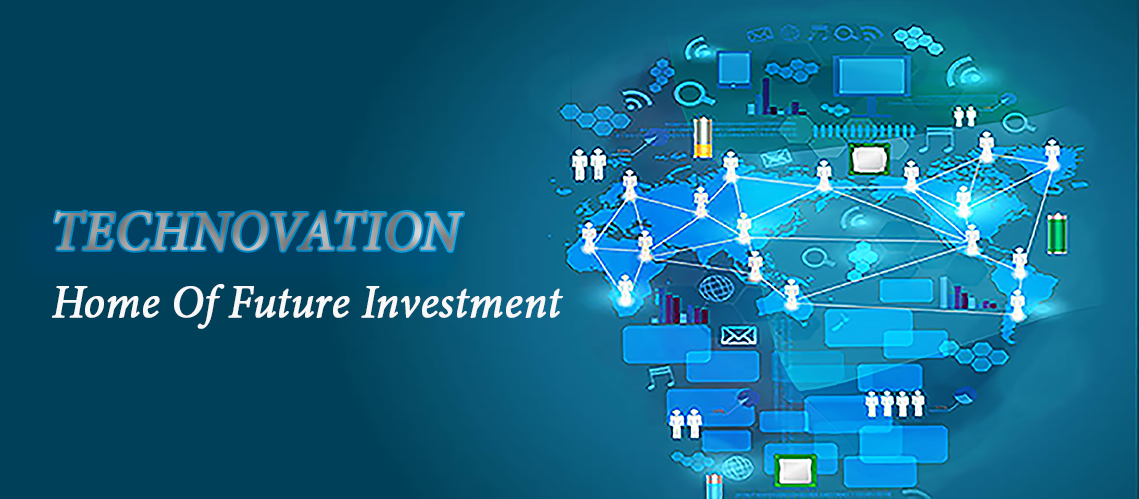
<style>
.page{position:relative;width:1139px;height:499px;background:#004059}
.page>*{position:absolute;margin:0}
.t1{font:55.1px "MinionPro-It";font-weight:bold;scale:0.96 1}
.t2{font:45.9px "MinionPro-It";color:#f8f8f9;font-weight:bold;scale:0.96 1}
</style>
<div class="page">
<p class="t1" style="left:54px;top:211px;width:409px;height:40px">TECHNOVATION</p>
<p class="t2" style="left:52px;top:284px;width:511px;height:45px">Home Of Future Investment</p>
</div>
